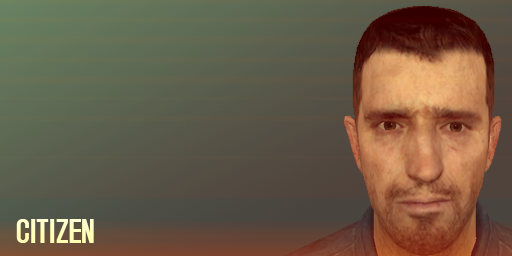
<style>
.page{position:relative;width:512px;height:256px}
.page>*{position:absolute;margin:0}
.t1{font:37px "AccidentalPresidency";color:#ffffc0}
</style>
<div class="page">
<p class="t1" style="left:16px;top:219px;width:78px;height:24px">CITIZEN</p>
</div>
